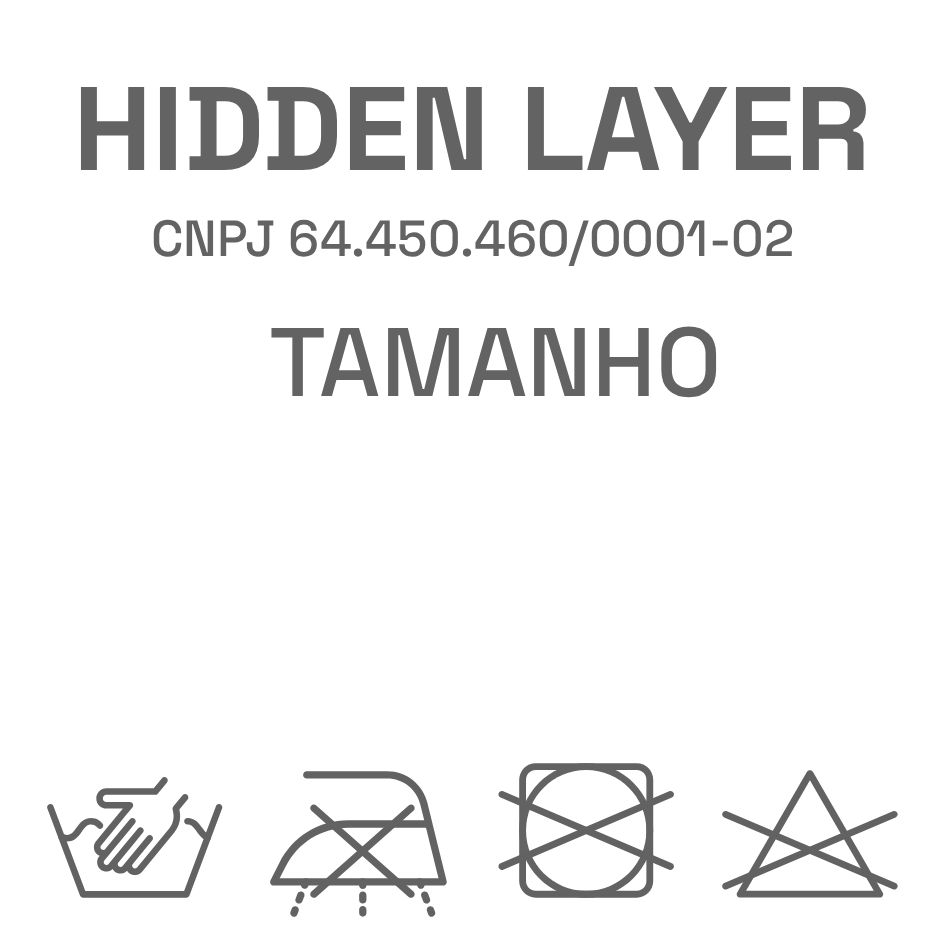
<style>
.page{position:relative;width:945px;height:945px;background:#ffffff}
.page>*{position:absolute;margin:0}
.t1{font:118.6px "SpaceGroteskLight-Bold";color:#636363}
.t2{font:50.6px "SpaceGroteskLight-Medium";color:#636363}
.t3{font:97.3px "SpaceGroteskLight-Medium";color:#636363}
</style>
<div class="page">
<p class="t1" style="left:80px;top:86px;width:786px;height:84px">HIDDEN LAYER</p>
<p class="t2" style="left:153px;top:219px;width:640px;height:47px">CNPJ 64.450.460/0001-02</p>
<p class="t3" style="left:271px;top:326px;width:446px;height:72px">TAMANHO</p>
</div>
